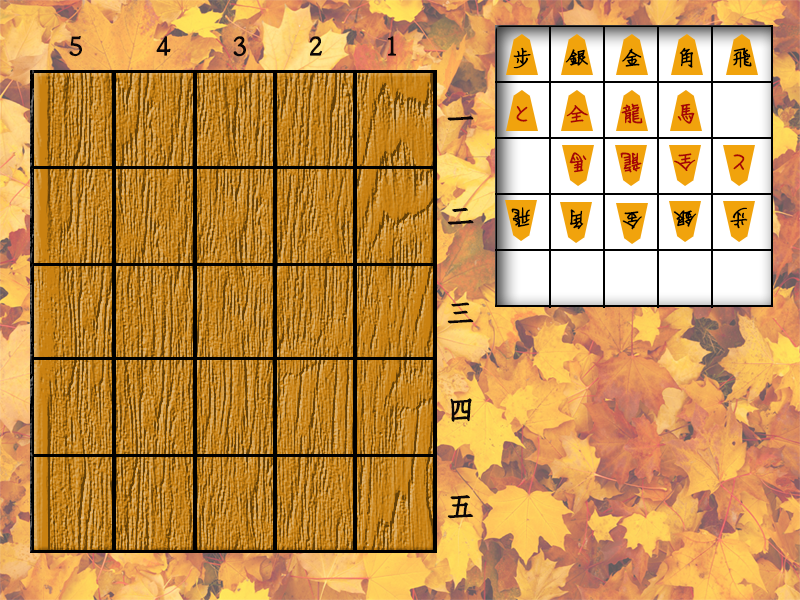
<style>
.page{position:relative;width:800px;height:600px}
.page>*{position:absolute;margin:0}
.t1{font:25px "DFYa-W3-WINP-BF";color:#000000;font-weight:bold}
.t2{font:25px "DFYa-W3-WINP-BF";color:#a60606;font-weight:bold}
</style>
<div class="page">
<p class="t1" style="left:513px;top:47px;width:18px;height:22px">步</p>
<p class="t1" style="left:565px;top:49px;width:23px;height:17px">銀</p>
<p class="t1" style="left:622px;top:48px;width:20px;height:19px">金</p>
<p class="t1" style="left:679px;top:47px;width:15px;height:21px">角</p>
<p class="t1" style="left:733px;top:47px;width:19px;height:21px">飛</p>
<p class="t2" style="left:516px;top:106px;width:12px;height:16px">と</p>
<p class="t2" style="left:566px;top:105px;width:22px;height:18px">全</p>
<p class="t2" style="left:621px;top:103px;width:22px;height:21px">龍</p>
<p class="t2" style="left:677px;top:103px;width:18px;height:21px">馬</p>
<p class="t2" style="left:569px;top:152px;width:18px;height:21px;rotate:180deg">馬</p>
<p class="t2" style="left:620px;top:152px;width:22px;height:21px;rotate:180deg">龍</p>
<p class="t2" style="left:674px;top:153px;width:22px;height:18px;rotate:180deg">全</p>
<p class="t2" style="left:733px;top:154px;width:12px;height:16px;rotate:180deg">と</p>
<p class="t1" style="left:511px;top:207px;width:19px;height:21px;rotate:180deg">飛</p>
<p class="t1" style="left:570px;top:209px;width:14px;height:21px;rotate:180deg">角</p>
<p class="t1" style="left:730px;top:207px;width:18px;height:22px;rotate:180deg">步</p>
<p class="t1" style="left:622px;top:211px;width:20px;height:19px;rotate:180deg">金</p>
<p class="t1" style="left:673px;top:210px;width:24px;height:17px;rotate:180deg">銀</p>
</div>
